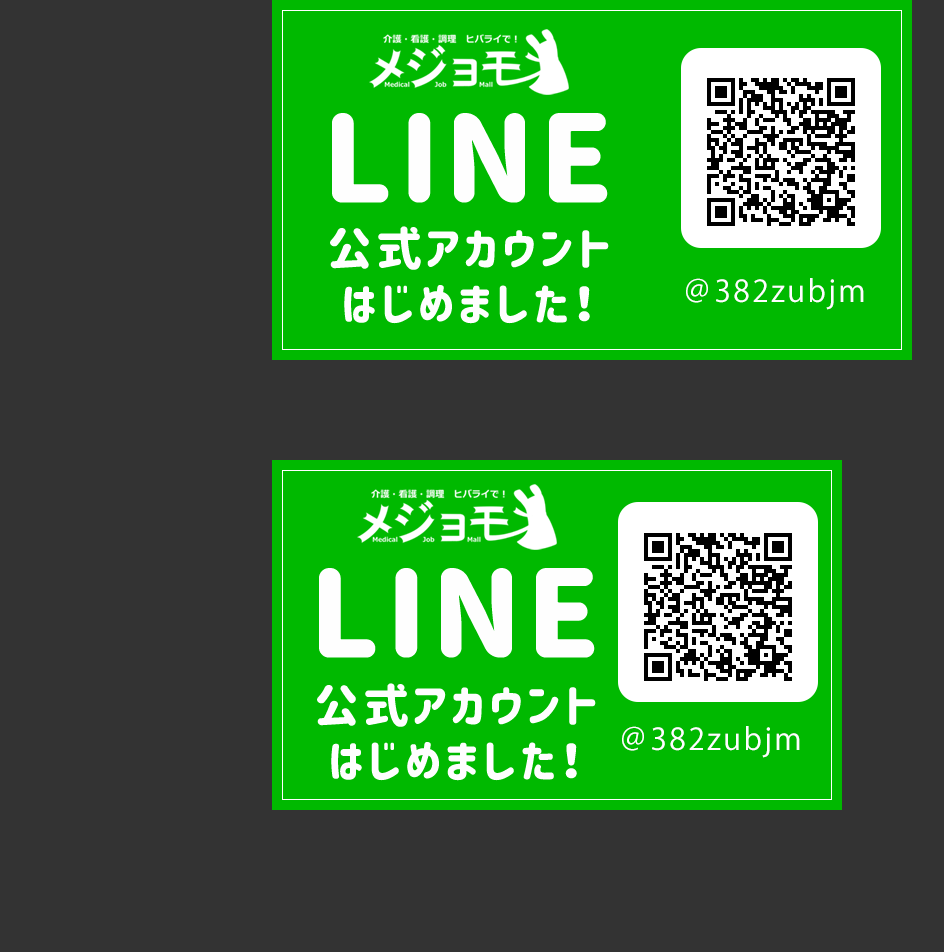
<style>
.page{position:relative;width:944px;height:952px;background:#333333}
.page>*{position:absolute;margin:0}
.t1{font:120px "Corporate-Logo-Rounded";letter-spacing:0.08em;color:#fefefe}
.t2{font:46px "Corporate-Logo-Rounded";letter-spacing:0.08em;color:#fefefe}
.t3{font:30px "KozGoPr6N-Regular";letter-spacing:0.08em;color:#fefefe}
</style>
<div class="page">
<p class="t1" style="left:332px;top:113px;width:276px;height:90px">LINE</p>
<p class="t2" style="left:330px;top:226px;width:279px;height:98px;text-align:center">公式アカウント<br>はじめました！</p>
<p class="t3" style="left:686px;top:278px;width:178px;height:32px">＠382zubjm</p>
<p class="t1" style="left:319px;top:568px;width:276px;height:90px">LINE</p>
<p class="t2" style="left:317px;top:683px;width:279px;height:98px;text-align:center">公式アカウント<br>はじめました！</p>
<p class="t3" style="left:622px;top:726px;width:178px;height:32px">＠382zubjm</p>
</div>
